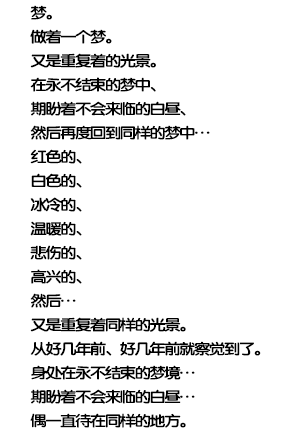
<style>
.page{position:relative;width:302px;height:432px;background:#ffffff}
.page>*{position:absolute;margin:0}
.t1{font:15px/24px "FZY4K--GBK1-0";letter-spacing:-0.13em;color:#000000;scale:1.14 1}
</style>
<div class="page">
<p class="t1" style="left:30px;top:5px;width:231px;height:423px">梦。<br>做着一个梦。<br>又是重复着的光景。<br>在永不结束的梦中、<br>期盼着不会来临的白昼、<br>然后再度回到同样的梦中…<br>红色的、<br>白色的、<br>冰冷的、<br>温暖的、<br>悲伤的、<br>高兴的、<br>然后…<br>又是重复着同样的光景。<br>从好几年前、好几年前就察觉到了。<br>身处在永不结束的梦境…<br>期盼着不会来临的白昼…<br>偶一直待在同样的地方。</p>
</div>
